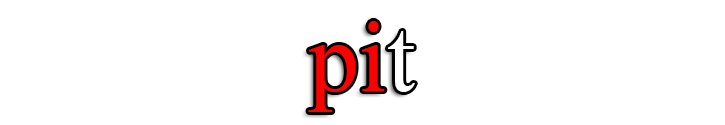
<style>
.page{position:relative;width:725px;height:125px;background:#ffffff}
.page>*{position:absolute;margin:0}
.t1{font:100px "TimesNewRomanPSMT";color:#ff0000}
.t2{font:100px "TimesNewRomanPSMT";color:#ffffff}
</style>
<div class="page">
<p class="t1" style="left:308px;top:21px;width:107px;height:91px">pi<span class="t2">t</span></p>
</div>
